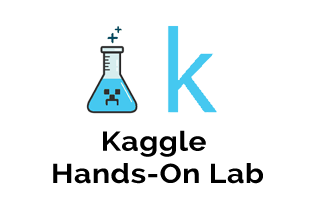
<style>
.page{position:relative;width:316px;height:210px;background:#ffffff}
.page>*{position:absolute;margin:0}
.t1{font:27.3px/32.4px "Raleway-Bold";letter-spacing:0.02em;color:#000000;scale:1.1 1}
</style>
<div class="page">
<p class="t1" style="left:53px;top:130px;width:210px;height:54px;text-align:center">Kaggle <br>Hands-On Lab</p>
</div>
